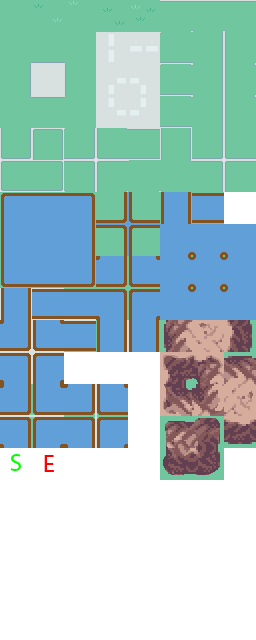
<style>
.page{position:relative;width:256px;height:640px;background:#ffffff}
.page>*{position:absolute;margin:0}
.t1{font:24px "MyriadPro-Regular";color:#00ff00}
.t2{font:24px "MyriadPro-Regular";color:#ff0000}
</style>
<div class="page">
<p class="t1" style="left:10px;top:454px;width:11px;height:17px">S</p>
<p class="t2" style="left:44px;top:455px;width:10px;height:17px">E</p>
</div>
